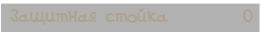
<style>
.page{position:relative;width:261px;height:35px;background:#b2b2b2}
.page>*{position:absolute;margin:0}
.t1{font:18px "DSGoose";color:#b1a18a}
</style>
<div class="page">
<p class="t1" style="left:10px;top:8px;width:158px;height:17px">Защитная стойка</p>
<p class="t1" style="left:243px;top:9px;width:10px;height:13px">0</p>
</div>
